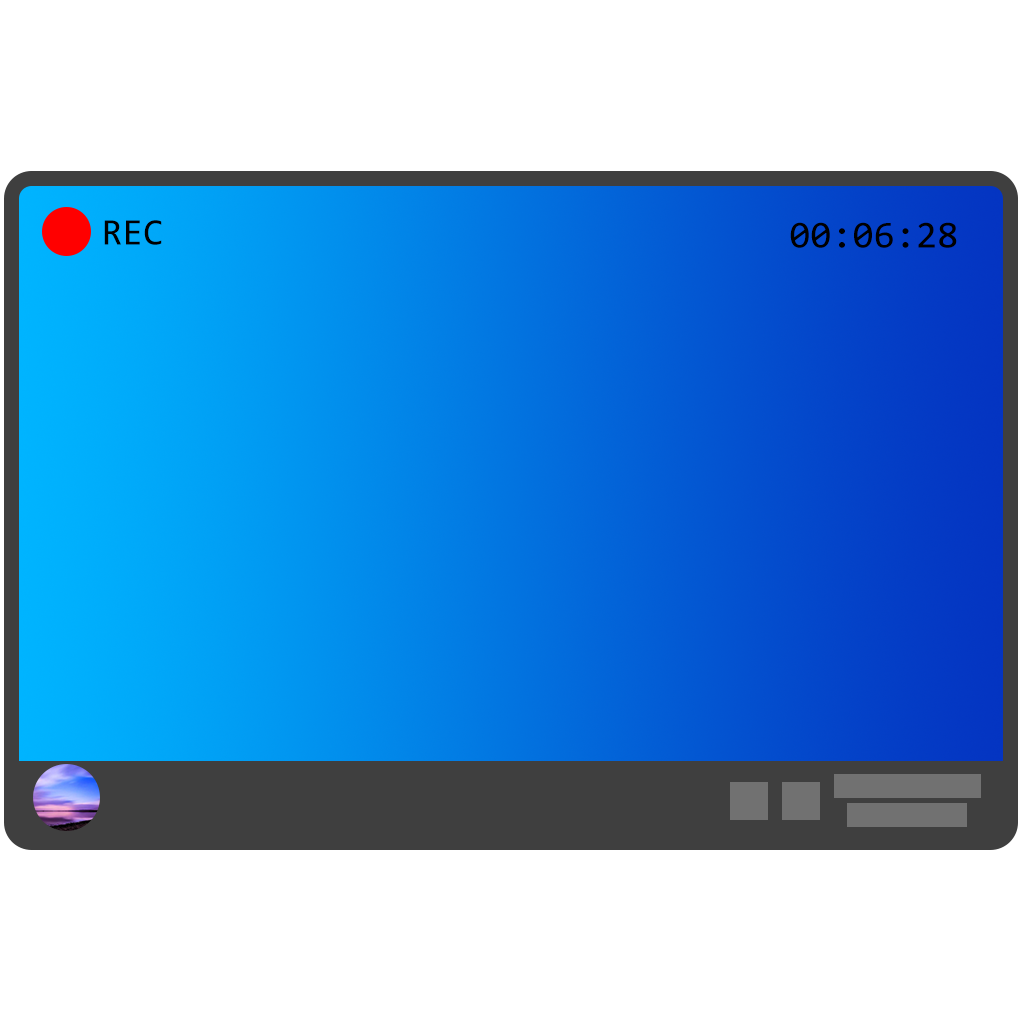
<style>
.page{position:relative;width:1024px;height:1024px;background:#ffffff}
.page>*{position:absolute;margin:0}
.t1{font:37.8px "Consolas";color:#000000}
.t2{font:38.4px "Consolas";color:#000000}
</style>
<div class="page">
<p class="t1" style="left:104px;top:220px;width:58px;height:25px">REC</p>
<p class="t2" style="left:790px;top:222px;width:167px;height:26px">00:06:28</p>
</div>
